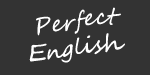
<style>
.page{position:relative;width:150px;height:75px;background:#333333}
.page>*{position:absolute;margin:0}
.t1{font:22.5px "SegoeScript";color:#ffffff}
</style>
<div class="page">
<p class="t1" style="left:29px;top:7px;width:96px;height:56px;text-align:center">Perfect English</p>
</div>
